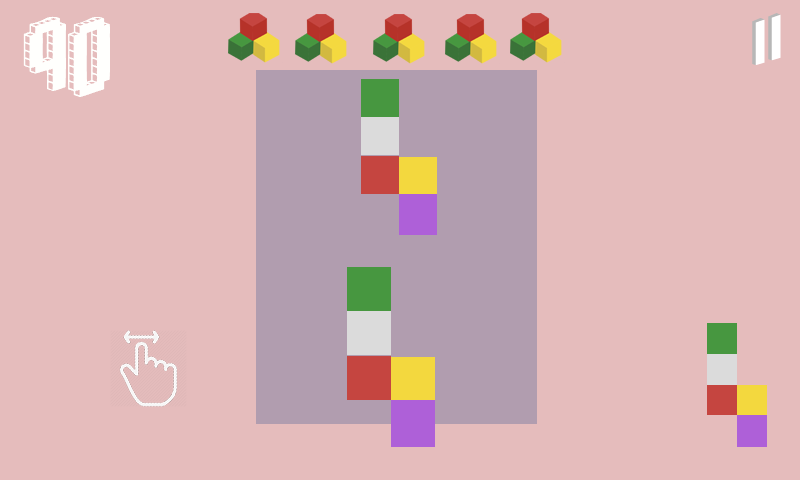
<style>
.page{position:relative;width:800px;height:480px;background:#e5bcbc}
.page>*{position:absolute;margin:0}
.t1{font:89px "Blox-(BRK";color:#fffffd}
</style>
<div class="page">
<p class="t1" style="left:23px;top:16px;width:87px;height:81px">90</p>
</div>
